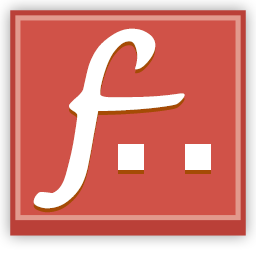
<style>
.page{position:relative;width:256px;height:256px;background:#d05248}
.page>*{position:absolute;margin:0}
.t1{font:177.9px "SegoeScript";color:#ffffff;font-weight:bold;scale:1.42 1}
</style>
<div class="page">
<p class="t1" style="left:33px;top:28px;width:152px;height:181px">f</p>
</div>
